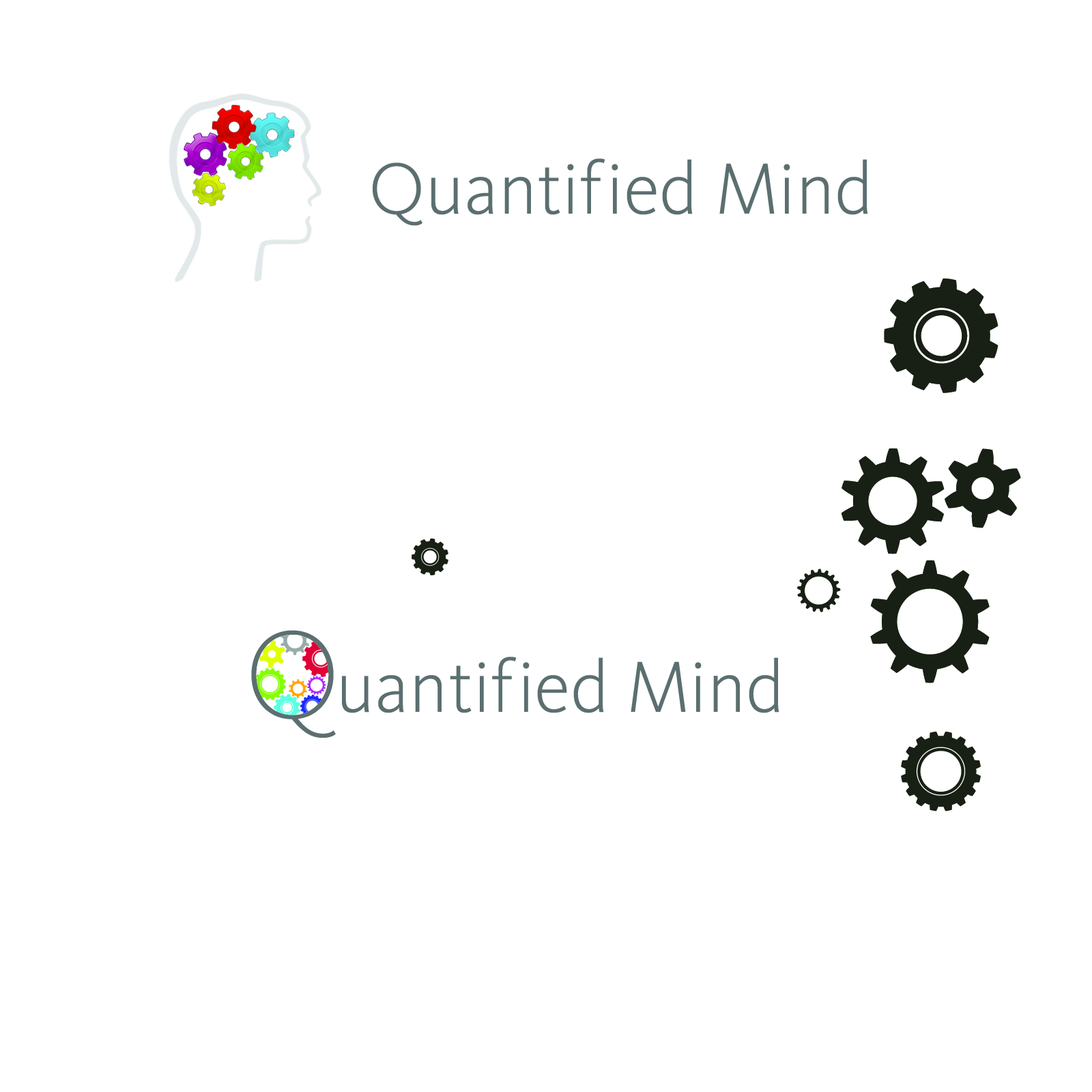
<style>
.page{position:relative;width:1092px;height:1092px;background:#ffffff}
.page>*{position:absolute;margin:0}
.t1{font:75.1px "KievitOT-Light";color:#5d6f70}
.t2{font:129.7px "KievitOT-ExtraLight";color:#5d6f70}
</style>
<div class="page">
<p class="t1" style="left:373px;top:158px;width:495px;height:68px">Quantif ied Mind</p>
<p class="t2" style="left:251px;top:630px;width:85px;height:108px">Q</p>
<p class="t1" style="left:342px;top:657px;width:437px;height:56px">uantif ied Mind</p>
</div>
